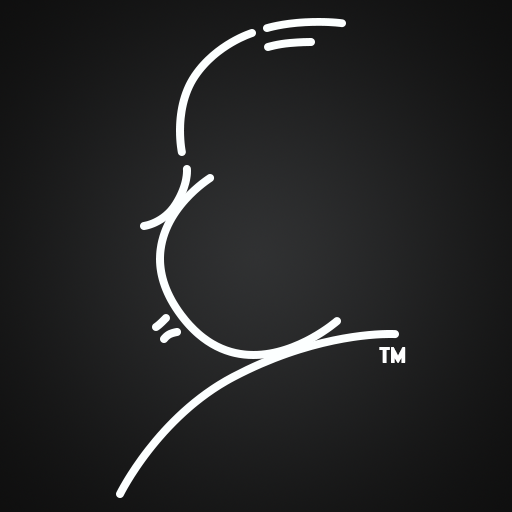
<style>
.page{position:relative;width:512px;height:512px}
.page>*{position:absolute;margin:0}
.t1{font:20px "Cervino-BlackExpanded";color:#ffffff}
</style>
<div class="page">
<p class="t1" style="left:379px;top:347px;width:27px;height:16px">TM</p>
</div>
